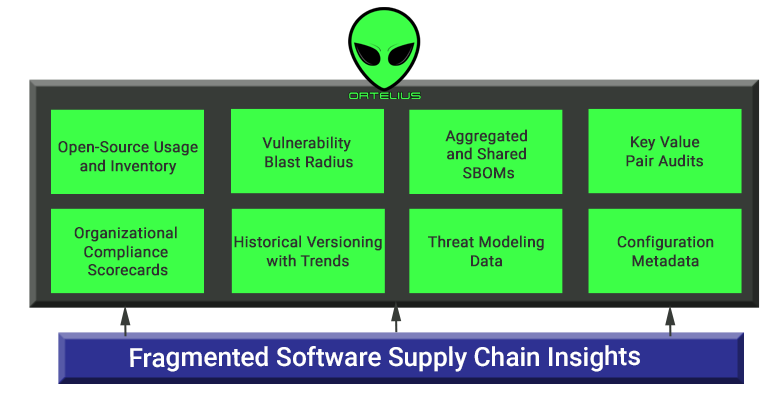
<style>
.page{position:relative;width:768px;height:393px;background:#3dff47}
.page>*{position:absolute;margin:0}
.t1{font:15.3px "Roboto-Regular";color:#303030;font-weight:bold}
.t2{font:26.2px "Roboto-Medium";color:#ffffff}
</style>
<div class="page">
<p class="t1" style="left:262px;top:136px;width:91px;height:32px;text-align:center">Vulnerability <br>Blast Radius</p>
<p class="t1" style="left:445px;top:129px;width:82px;height:50px;text-align:center">Aggregated <br>and Shared <br>SBOMs</p>
<p class="t1" style="left:626px;top:135px;width:77px;height:32px;text-align:center">Key Value<br>Pair Audits</p>
<p class="t1" style="left:58px;top:141px;width:140px;height:34px;text-align:center">Open-Source Usage<br>and Inventory</p>
<p class="t1" style="left:74px;top:226px;width:103px;height:50px;text-align:center">Organizational <br>Compliance <br>Scorecards</p>
<p class="t1" style="left:234px;top:235px;width:148px;height:32px;text-align:center">Historical Versioning<br>with Trends</p>
<p class="t1" style="left:428px;top:235px;width:116px;height:32px;text-align:center">Threat Modeling<br>Data</p>
<p class="t1" style="left:617px;top:235px;width:97px;height:32px;text-align:center">Configuration<br>Metadata</p>
<p class="t2" style="left:130px;top:345px;width:510px;height:27px">Fragmented Software Supply Chain Insights</p>
</div>
